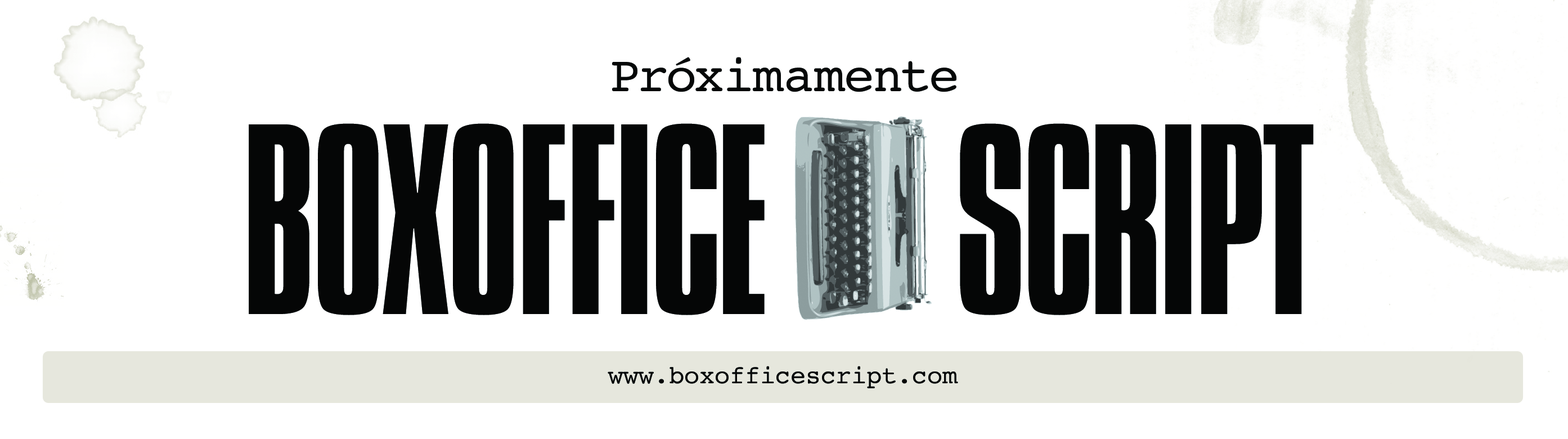
<style>
.page{position:relative;width:1568px;height:439px;background:#ffffff}
.page>*{position:absolute;margin:0}
.t1{font:50.6px "Courier";color:#060808}
.t2{font:233.5px "CompactaBT-Light";letter-spacing:-0.025em;color:#050606}
.t3{font:233.5px "CompactaBT-Light";letter-spacing:-0.015em;color:#050606}
.t4{font:25.3px "Courier";color:#050606}
</style>
<div class="page">
<p class="t1" style="left:612px;top:57px;width:344px;height:35px">Próximamente</p>
<p class="t2" style="left:249px;top:123px;width:1065px;height:192px">BOXOFFICE      SCRI<span class="t3">P</span>T</p>
<p class="t4" style="left:608px;top:366px;width:350px;height:22px">www.boxofficescript.com</p>
</div>
